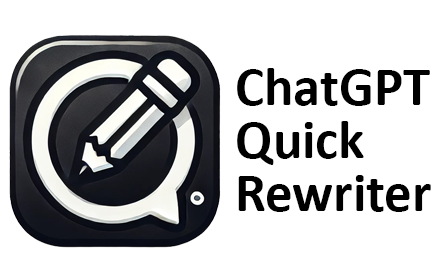
<style>
.page{position:relative;width:440px;height:280px;background:#ffffff}
.page>*{position:absolute;margin:0}
.t1{font:54.7px/53.3px "Calibri-Bold";color:#000000}
</style>
<div class="page">
<p class="t1" style="left:237px;top:68px;width:194px;height:144px">ChatGPT<br>Quick<br>Rewriter</p>
</div>
